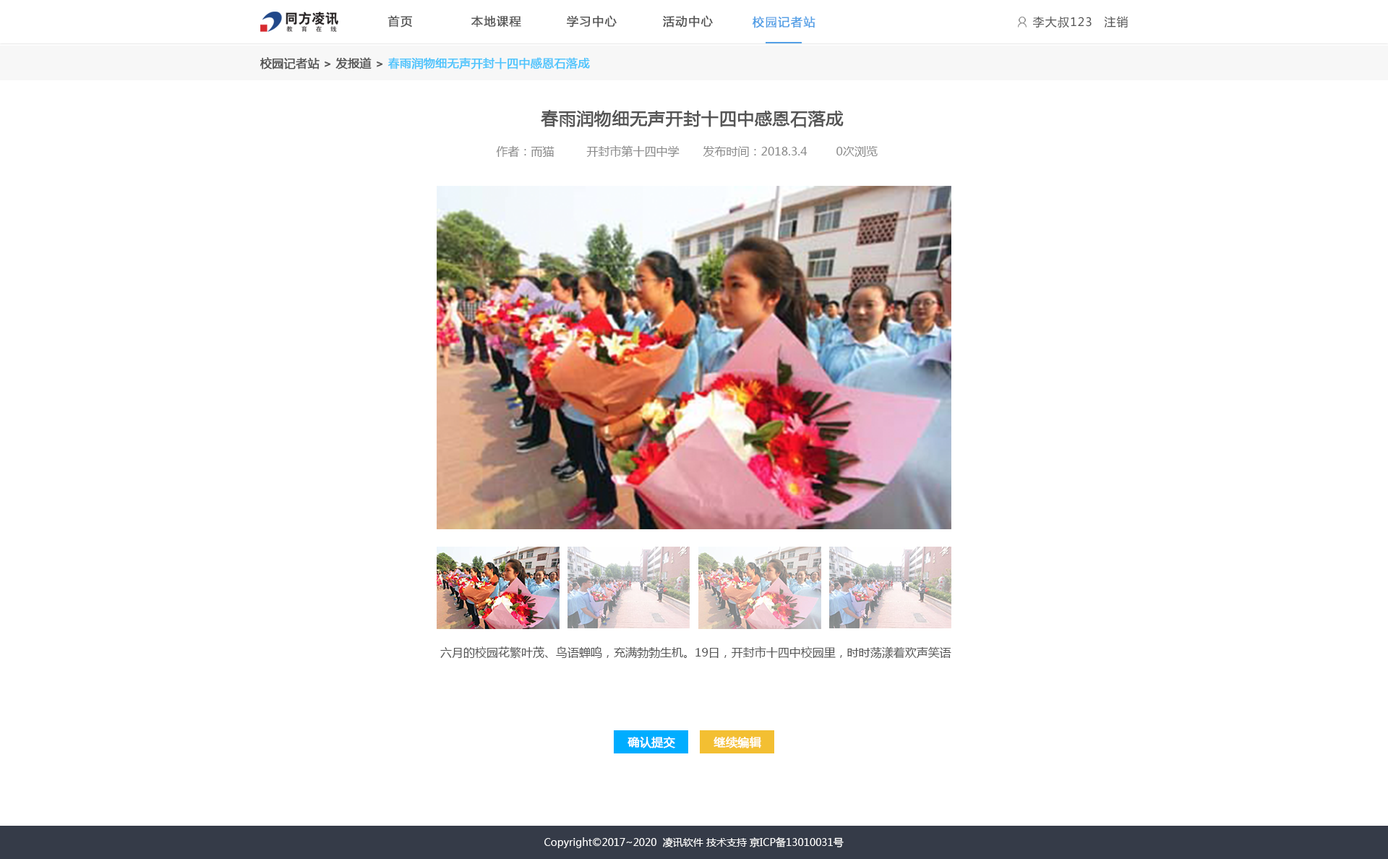
<style>
.page{position:relative;width:1388px;height:859px;background:#ffffff}
.page>*{position:absolute;margin:0}
.t1{font:11.6px "MicrosoftYaHei";letter-spacing:0.075em;color:#555555;font-weight:bold}
.t2{font:11.6px "MicrosoftYaHei";letter-spacing:0.075em;color:#54a0e6;font-weight:bold}
.t3{font:11.6px "MicrosoftYaHei";letter-spacing:0.075em;color:#555555}
.t4{font:11.6px "MicrosoftYaHei";color:#4dc4fc;font-weight:bold}
.t5{font:11.6px "MicrosoftYaHei";color:#555555;font-weight:bold}
.t6{font:17.4px "MicrosoftYaHei";color:#555555;font-weight:bold}
.t7{font:11.6px "MicrosoftYaHei";color:#8a8a8a}
.t8{font:11.6px "MicrosoftYaHei";color:#555555}
.t9{font:11.6px "MicrosoftYaHei";color:#ffffff;font-weight:bold}
.t10{font:10.1px "MicrosoftYaHei";color:#ffffff}
</style>
<div class="page">
<p class="t1" style="left:388px;top:15px;width:24px;height:12px">首页</p>
<p class="t1" style="left:471px;top:15px;width:50px;height:12px">本地课程</p>
<p class="t1" style="left:567px;top:15px;width:50px;height:12px">学习中心</p>
<p class="t1" style="left:663px;top:15px;width:50px;height:12px">活动中心</p>
<p class="t2" style="left:753px;top:16px;width:63px;height:12px">校园记者站</p>
<p class="t3" style="left:1032px;top:16px;width:60px;height:12px">李大叔123</p>
<p class="t3" style="left:1104px;top:16px;width:24px;height:11px">注销</p>
<p class="t4" style="left:260px;top:57px;width:330px;height:12px"><span class="t5">校园记者站 &gt; 发报道 &gt;</span> 春雨润物细无声开封十四中感恩石落成</p>
<p class="t6" style="left:541px;top:110px;width:303px;height:18px">春雨润物细无声开封十四中感恩石落成</p>
<p class="t7" style="left:496px;top:145px;width:59px;height:13px">作者：而猫</p>
<p class="t7" style="left:586px;top:145px;width:94px;height:13px">开封市第十四中学</p>
<p class="t7" style="left:703px;top:146px;width:105px;height:11px">发布时间：2018.3.4</p>
<p class="t7" style="left:837px;top:146px;width:41px;height:11px">0次浏览</p>
<p class="t8" style="left:440px;top:646px;width:512px;height:13px">六月的校园花繁叶茂、鸟语蝉鸣，充满勃勃生机。19日，开封市十四中校园里，时时荡漾着欢声笑语。</p>
<p class="t9" style="left:628px;top:736px;width:47px;height:12px">确认提交</p>
<p class="t9" style="left:714px;top:736px;width:47px;height:12px">继续编辑</p>
<p class="t10" style="left:544px;top:837px;width:300px;height:11px">Copyright©2017~2020  凌讯软件 技术支持 京ICP备13010031号</p>
</div>
